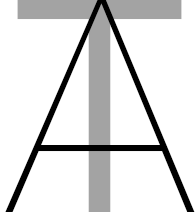
<style>
.page{position:relative;width:195px;height:212px;background:#ffffff}
.page>*{position:absolute;margin:0}
.t1{font:300px "AvenirNext-UltraLight";letter-spacing:-0.025em;color:#000000;text-transform:uppercase}
.t2{font:300px "AvenirNext-Regular";letter-spacing:-0.025em;color:#a3a3a3;text-transform:uppercase}
</style>
<div class="page">
<p class="t1" style="left:5px;top:0px;width:190px;height:212px">A</p>
<p class="t2" style="left:17px;top:0px;width:165px;height:212px">T</p>
</div>
